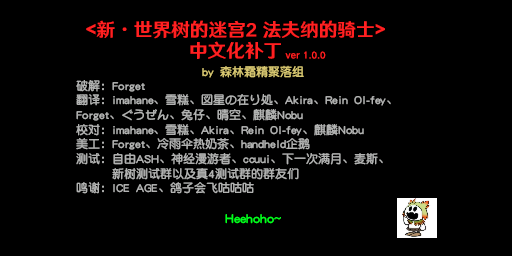
<style>
.page{position:relative;width:512px;height:256px;background:#000000}
.page>*{position:absolute;margin:0}
.t1{font:18.7px/21.3px "HYWenHei-HEW";color:#ff2021}
.t2{font:9.3px "HYWenHei-FEW";letter-spacing:0.025em;color:#ff2021}
.t3{font:12px/14.7px "DFYuanGBA-W7";color:#b1b2b1}
.t4{font:12px/13.3px "DFYuanGBA-W7";color:#d6c670}
.t5{font:13.3px/16px "DFYuanGBA-W7";color:#00ff1e}
</style>
<div class="page">
<p class="t1" style="left:86px;top:20px;width:299px;height:39px;text-align:center">&lt;新·世界树的迷宫2 法夫纳的骑士&gt;<br>中文化补丁</p>
<p class="t2" style="left:285px;top:51px;width:41px;height:8px">ver 1.0.0</p>
<p class="t3" style="left:76px;top:65px;width:315px;height:159px;text-align:center"><span class="t4">by 森林霜精聚落组<br></span>破解：Forget<br>翻译：imahane、雪糕、図星の在り処、Akira、Rein Ol-fey、Forget、ぐうぜん、兔仔、晴空、麒麟Nobu<br>校对：imahane、雪糕、Akira、Rein Ol-fey、麒麟Nobu<br>美工：Forget、冷雨伞热奶茶、handheld企鹅<br>测试：自由ASH、神经漫游者、ccuui、下一次满月、麦斯、<br>      新树测试群以及真4测试群的群友们<br>鸣谢：ICE AGE、鸽子会飞咕咕咕<br><br><span class="t5">Heehoho~</span></p>
</div>
